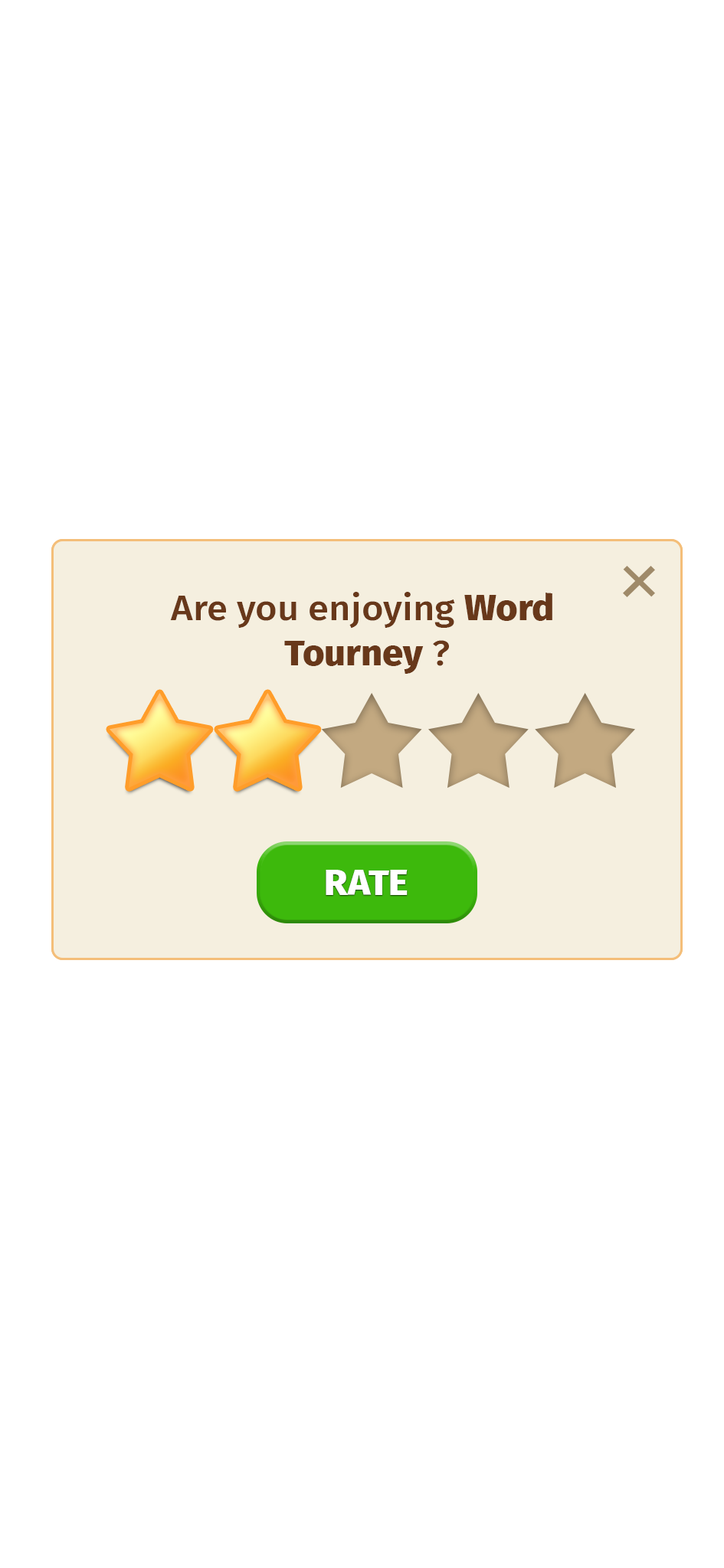
<style>
.page{position:relative;width:724px;height:1568px;background:#ffffff}
.page>*{position:absolute;margin:0}
.t1{font:35.6px "FiraSans-Medium";color:#68381a;scale:1.05 1}
.t2{font:35.6px "FiraSans-ExtraBold";color:#68381a;scale:1.05 1}
.t3{font:35.6px "FiraSans-ExtraBold";color:#eeedec;scale:1.05 1}
.t4{font:35.6px "FiraSans-ExtraBold";color:#ffffff;scale:1.05 1}
</style>
<div class="page">
<p class="t1" style="left:170px;top:592px;width:382px;height:82px;text-align:center">Are you enjoying <span class="t2">Word <br>Tourney</span> ?</p>
<p class="t1" style="left:170px;top:592px;width:382px;height:82px;text-align:center">Are you enjoying <span class="t2">Word <br>Tourney</span> ?</p>
<p class="t3" style="left:325px;top:870px;width:82px;height:25px">RATE</p>
<p class="t4" style="left:325px;top:870px;width:82px;height:25px">RATE</p>
</div>
